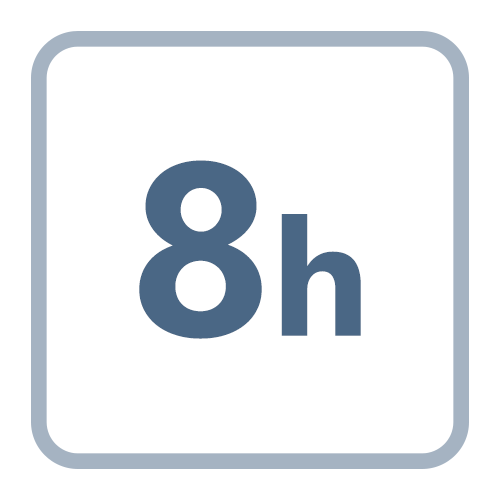
<style>
.page{position:relative;width:500px;height:500px;background:#ffffff}
.page>*{position:absolute;margin:0}
.t1{font:246px "Gadugi-Bold";color:#4a6785}
.t2{font:164px "Gadugi-Bold";color:#4a6785}
</style>
<div class="page">
<p class="t1" style="left:139px;top:160px;width:222px;height:179px">8<span class="t2">h</span></p>
</div>
